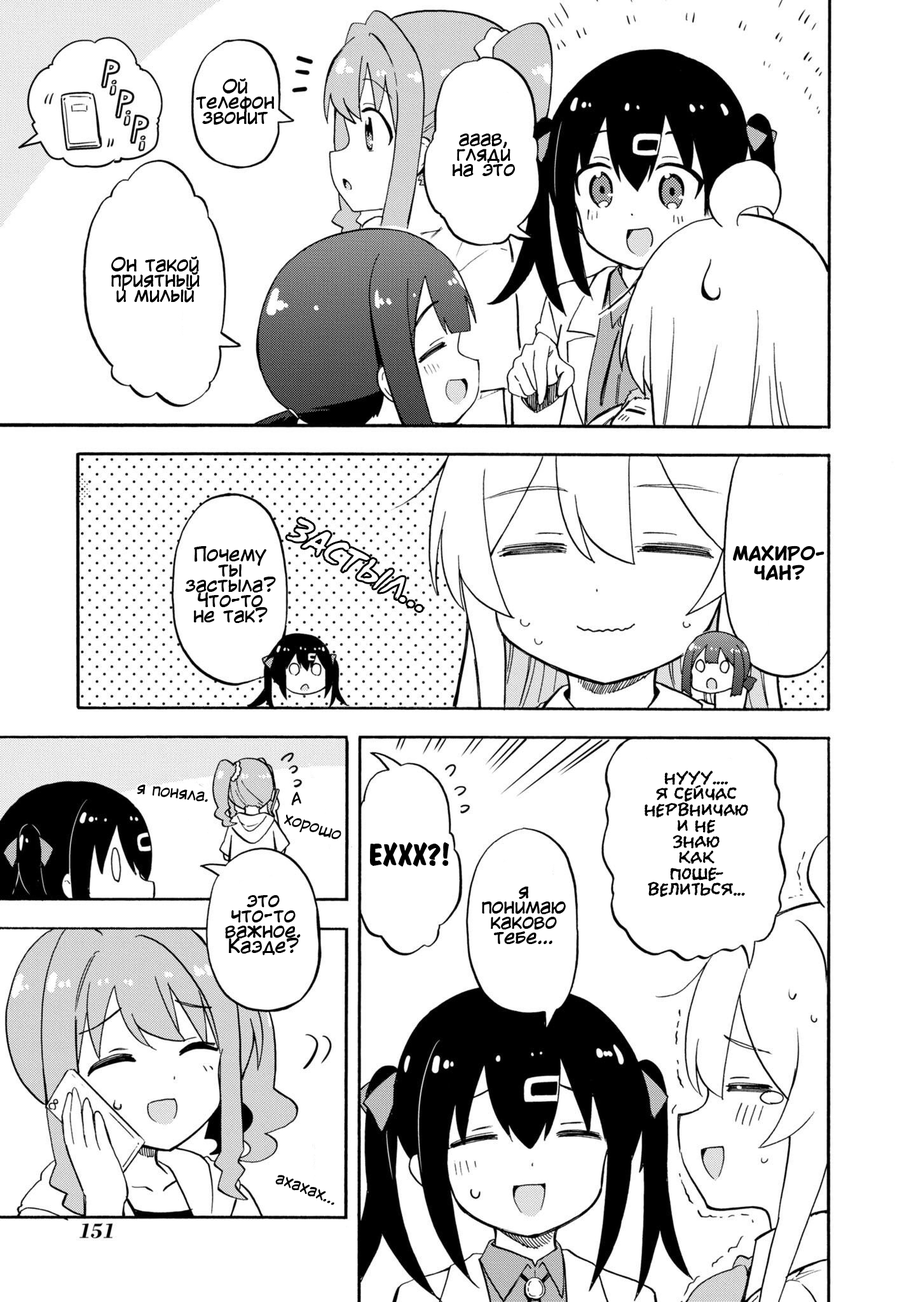
<style>
.page{position:relative;width:916px;height:1302px;background:#ffffff}
.page>*{position:absolute;margin:0}
.t1{font:19.1px/15.3px "KuraiVoice2";color:#000000}
.t2{font:17.8px/19.1px "KuraiVoice2-Bold";color:#000000}
.t3{font:19.1px/15.9px "el_CCEvilSchemes";color:#000000}
.t4{font:15.3px "KuraiVoice2";color:#000000}
.t5{font:30.5px "ADomInoBold";color:#000000}
</style>
<div class="page">
<p class="t1" style="left:196px;top:78px;width:79px;height:47px;text-align:center">Ой<br>телефон<br>звонит</p>
<p class="t1" style="left:452px;top:133px;width:63px;height:44px;text-align:center">ааав,<br>гляди<br>на это</p>
<p class="t1" style="left:111px;top:256px;width:89px;height:47px;text-align:center">Он такой<br>приятный<br>и милый</p>
<p class="t2" style="left:733px;top:545px;width:91px;height:35px;text-align:center">МАХИРО-<br>ЧАН?</p>
<p class="t1" style="left:185px;top:546px;width:91px;height:77px;text-align:center">Почему<br>ты<br>застыла?<br>Что-то<br>не так?</p>
<p class="t3" style="left:645px;top:770px;width:103px;height:127px;text-align:center">НУУУ....<br>Я сейчас<br>нервничаю<br>и не<br>знаю<br>как<br>поше-<br>велиться...</p>
<p class="t4" style="left:137px;top:784px;width:71px;height:18px;rotate:7deg">я поняла.</p>
<p class="t4" style="left:291px;top:791px;width:10px;height:14px;rotate:-8deg">А</p>
<p class="t4" style="left:284px;top:814px;width:57px;height:25px;rotate:17deg">хорошо</p>
<p class="t5" style="left:370px;top:842px;width:79px;height:24px">ЕХХХ?!</p>
<p class="t1" style="left:482px;top:886px;width:84px;height:58px;text-align:center">я<br>понимаю<br>каково<br>тебе...</p>
<p class="t1" style="left:225px;top:895px;width:76px;height:60px;text-align:center">это<br>что-то<br>важное.<br>Каэде?</p>
<p class="t4" style="left:275px;top:1175px;width:59px;height:30px;rotate:21deg">ахахах...</p>
</div>
